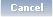
<style>
.page{position:relative;width:53px;height:17px}
.page>*{position:absolute;margin:0}
.t1{font:10px "Tahoma-Bold";color:#ffffff}
</style>
<div class="page">
<p class="t1" style="left:11px;top:3px;width:32px;height:8px">Cancel</p>
</div>
